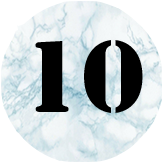
<style>
.page{position:relative;width:164px;height:164px;background:#ffffff}
.page>*{position:absolute;margin:0}
.t1{font:95.5px "StencilStd";color:#000000}
</style>
<div class="page">
<p class="t1" style="left:35px;top:40px;width:108px;height:73px">10</p>
</div>
